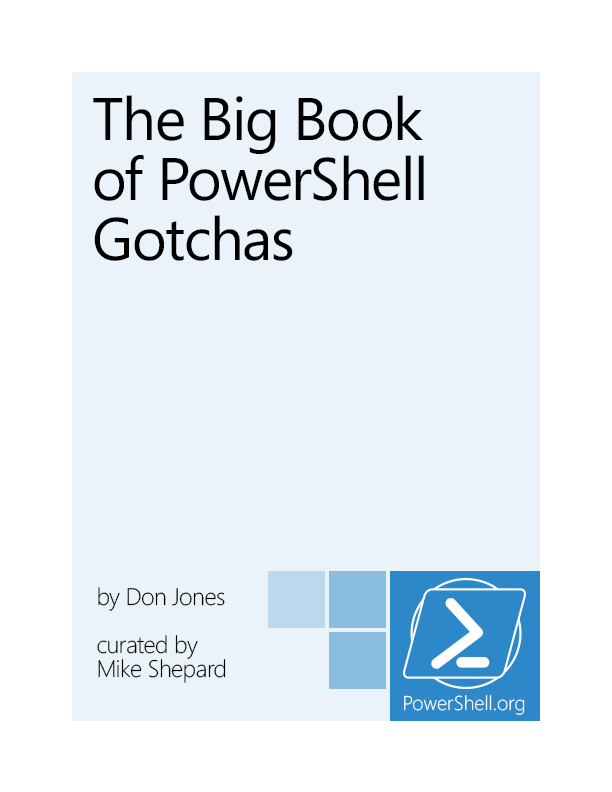
<style>
.page{position:relative;width:612px;height:792px;background:#eaf3f9}
.page>*{position:absolute;margin:0}
.t1{font:60px/60px "Segoe";letter-spacing:-0.025em;color:#000000}
.t2{font:24px/24px "Segoe-Light";letter-spacing:-0.025em;color:#000000}
</style>
<div class="page">
<p class="t1" style="left:93px;top:95px;width:331px;height:166px">The Big Book<br>of PowerShell<br>Gotchas</p>
<p class="t2" style="left:97px;top:587px;width:129px;height:96px">by Don Jones<br><br>curated by<br>Mike Shepard</p>
</div>
